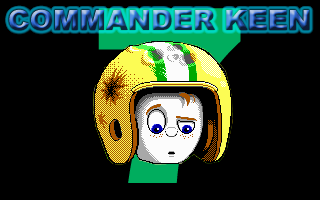
<style>
.page{position:relative;width:320px;height:200px;background:#000000}
.page>*{position:absolute;margin:0}
.t1{font:28px "Arial-Black"}
.t2{font:244px "Arial-Black"}
</style>
<div class="page">
<p class="t1" style="left:9px;top:9px;width:301px;height:22px">COMMANDER KEEN</p>
<p class="t2" style="left:98px;top:8px;width:143px;height:175px">7</p>
</div>
